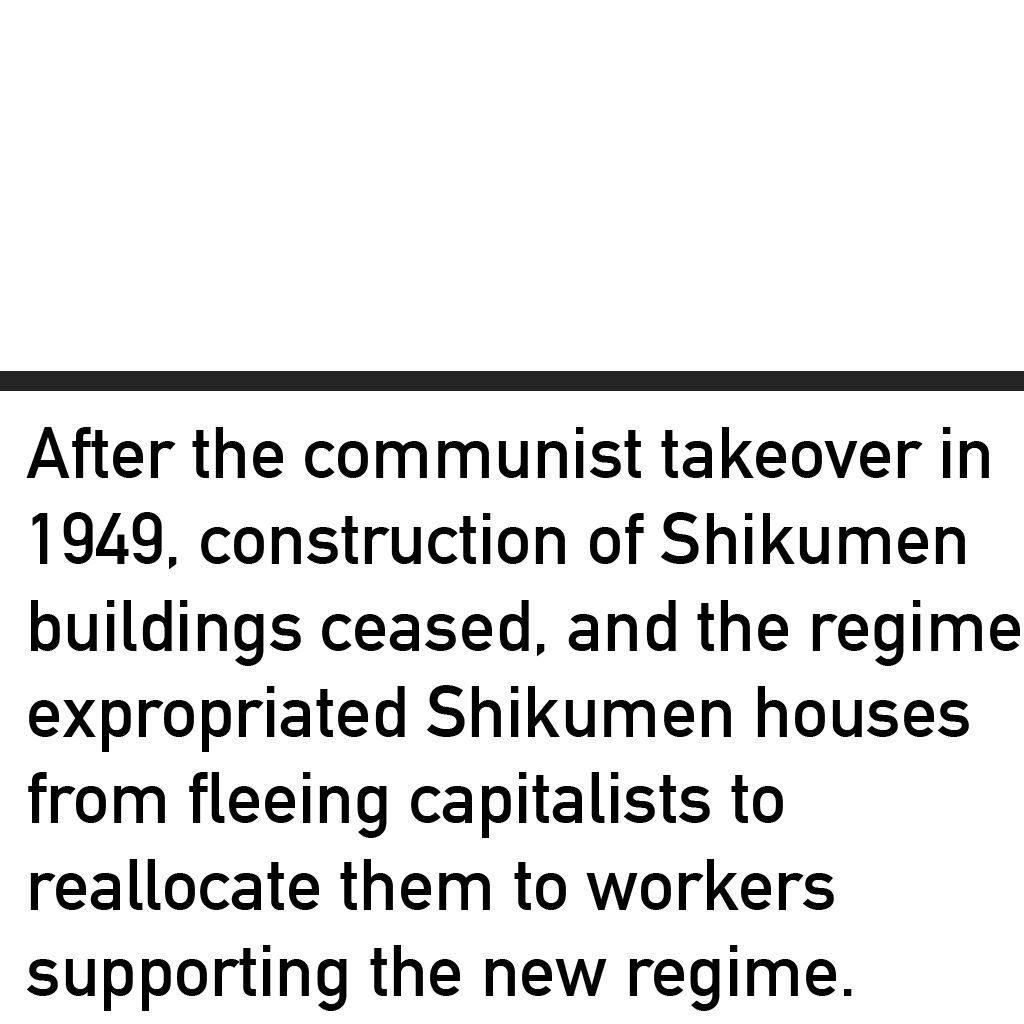
<style>
.page{position:relative;width:1024px;height:1024px;background:#ffffff}
.page>*{position:absolute;margin:0}
.t1{font:72px "DINAlternate-Bold";color:#000000}
</style>
<div class="page">
<p class="t1" style="left:26px;top:427px;width:994px;height:584px">After the communist takeover in<br>1949, construction of Shikumen <br>buildings ceased, and the regime<br>expropriated Shikumen houses <br>from fleeing capitalists to <br>reallocate them to workers <br>supporting the new regime.</p>
</div>
